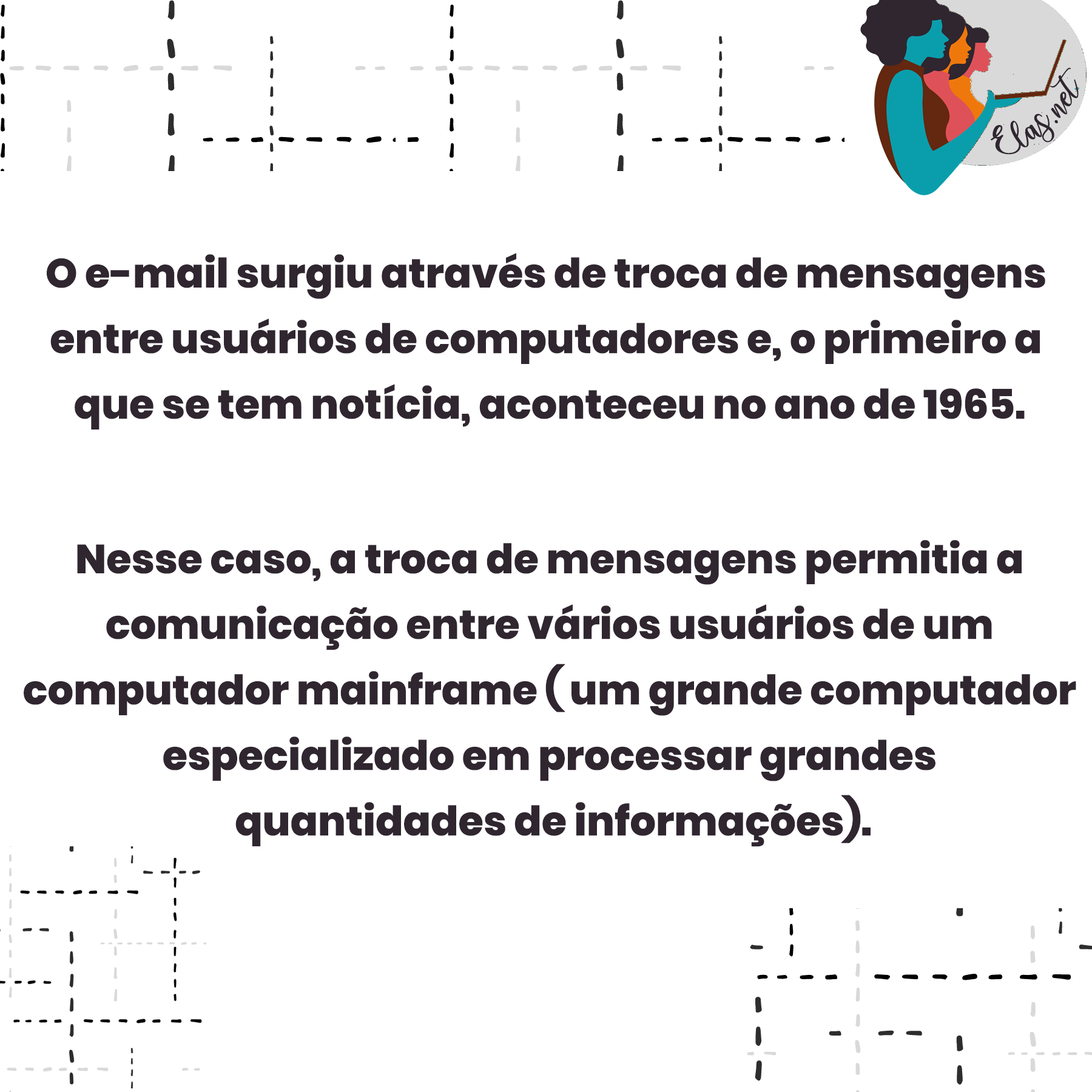
<style>
.page{position:relative;width:1092px;height:1092px;background:#ffffff}
.page>*{position:absolute;margin:0}
.t1{font:25px "charlinda-Regular";color:#2f262f;scale:1.18 1}
.t2{font:40.6px/65.5px "Poppins-ExtraBold";color:#2f262f}
</style>
<div class="page">
<p class="t1" style="left:991px;top:67px;width:88px;height:88px;rotate:-42deg">Elas.net</p>
<p class="t2" style="left:47px;top:253px;width:998px;height:177px;text-align:center">O e-mail surgiu através de troca de mensagens <br>entre usuários de computadores e, o primeiro a <br>que se tem notícia, aconteceu no ano de 1965.</p>
<p class="t2" style="left:24px;top:540px;width:1052px;height:307px;text-align:center">Nesse caso, a troca de mensagens permitia a <br>comunicação entre vários usuários de um <br>computador mainframe ( um grande computador <br>especializado em processar grandes <br>quantidades de informações).</p>
</div>
